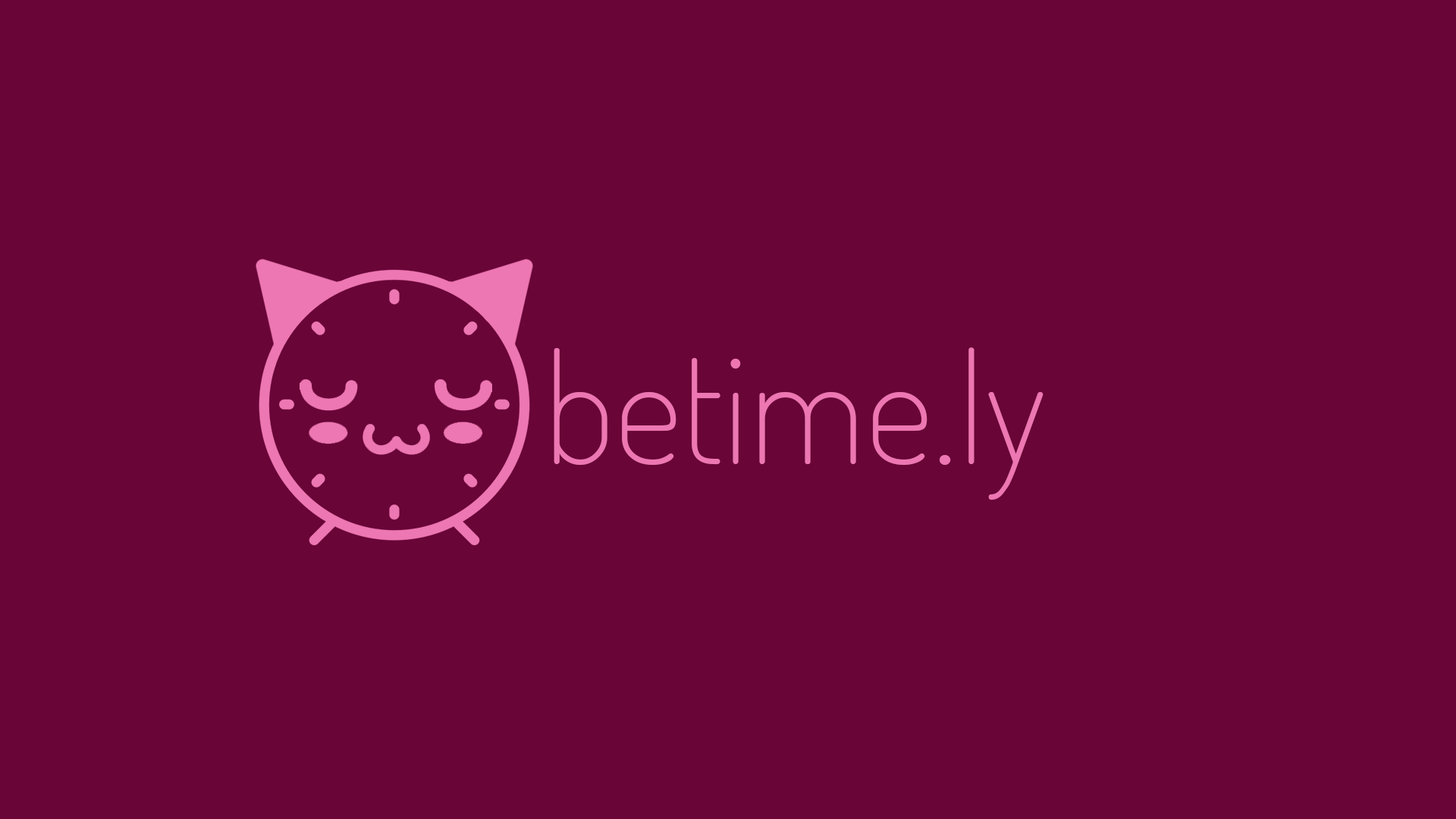
<style>
.page{position:relative;width:1456px;height:819px;background:#690537}
.page>*{position:absolute;margin:0}
.t1{font:151.7px "Dosis-ExtraLight";color:#ed77b2}
</style>
<div class="page">
<p class="t1" style="left:554px;top:347px;width:489px;height:153px">betime.ly</p>
</div>
